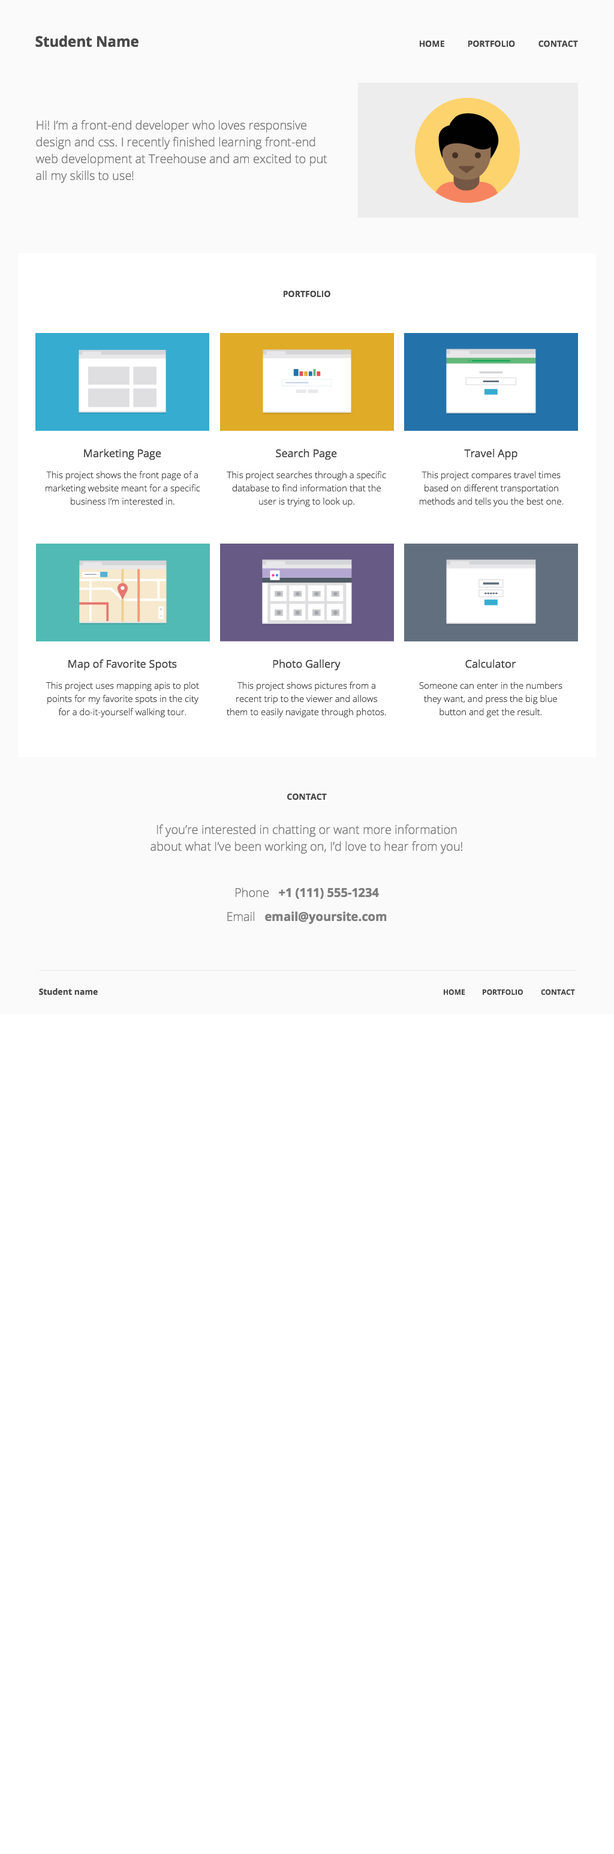
<style>
.page{position:relative;width:614px;height:1854px;background:#ffffff}
.page>*{position:absolute;margin:0}
.t1{font:14.4px "OpenSans-Bold";color:#4a4a4a}
.t2{font:8.4px "OpenSans-Bold";color:#4a4a4a}
.t3{font:12px/16.8px "OpenSans-Light";color:#7f7f7f}
.t4{font:10.8px "OpenSans";color:#4a4a4a}
.t5{font:9px/13.2px "OpenSans-Light";color:#4a4a4a}
.t6{font:12px "OpenSans-Bold";color:#7f7f7f}
.t7{font:12px "OpenSans-Light";color:#7f7f7f}
.t8{font:7.2px "OpenSans-Bold";color:#4a4a4a}
</style>
<div class="page">
<p class="t1" style="left:35px;top:35px;width:104px;height:12px">Student Name</p>
<p class="t2" style="left:419px;top:40px;width:26px;height:7px">HOME</p>
<p class="t2" style="left:468px;top:40px;width:47px;height:7px">PORTFOLIO</p>
<p class="t2" style="left:539px;top:40px;width:39px;height:7px">CONTACT</p>
<p class="t3" style="left:35px;top:120px;width:293px;height:63px">Hi! I’m a front-end developer who loves responsive design and css. I recently finished learning front-end web development at Treehouse and am excited to put all my skills to use!</p>
<p class="t2" style="left:283px;top:290px;width:48px;height:8px">PORTFOLIO</p>
<p class="t4" style="left:84px;top:449px;width:77px;height:11px">Marketing Page</p>
<p class="t4" style="left:276px;top:449px;width:61px;height:11px">Search Page</p>
<p class="t4" style="left:464px;top:449px;width:54px;height:11px">Travel App</p>
<p class="t5" style="left:46px;top:471px;width:154px;height:34px;text-align:center">This project shows the front page of a marketing website meant for a specific business I’m interested in.</p>
<p class="t5" style="left:227px;top:471px;width:159px;height:36px;text-align:center">This project searches through a specific database to find information that the user is trying to look up.</p>
<p class="t5" style="left:419px;top:471px;width:145px;height:36px;text-align:center">This project compares travel times based on different transportation methods and tells you the best one.</p>
<p class="t4" style="left:68px;top:659px;width:109px;height:12px">Map of Favorite Spots</p>
<p class="t4" style="left:273px;top:659px;width:68px;height:12px">Photo Gallery</p>
<p class="t4" style="left:466px;top:659px;width:51px;height:9px">Calculator</p>
<p class="t5" style="left:46px;top:682px;width:153px;height:36px;text-align:center">This project uses mapping apis to plot points for my favorite spots in the city for a do-it-yourself walking tour.</p>
<p class="t5" style="left:227px;top:682px;width:159px;height:36px;text-align:center">This project shows pictures from a recent trip to the viewer and allows them to easily navigate through photos.</p>
<p class="t5" style="left:419px;top:682px;width:144px;height:36px;text-align:center">Someone can enter in the numbers they want, and press the big blue button and get the result.</p>
<p class="t2" style="left:287px;top:793px;width:40px;height:7px">CONTACT</p>
<p class="t3" style="left:151px;top:824px;width:312px;height:30px;text-align:center">If you’re interested in chatting or want more information about what I’ve been working on, I’d love to hear from you!</p>
<p class="t6" style="left:235px;top:887px;width:144px;height:12px"><span class="t7">Phone   </span>+1 (111) 555-1234</p>
<p class="t6" style="left:227px;top:911px;width:160px;height:13px"><span class="t7">Email   </span>email@yoursite.com</p>
<p class="t2" style="left:39px;top:988px;width:59px;height:7px">Student name</p>
<p class="t8" style="left:443px;top:989px;width:23px;height:6px">HOME</p>
<p class="t8" style="left:482px;top:989px;width:41px;height:6px">PORTFOLIO</p>
<p class="t8" style="left:541px;top:989px;width:34px;height:6px">CONTACT</p>
</div>
